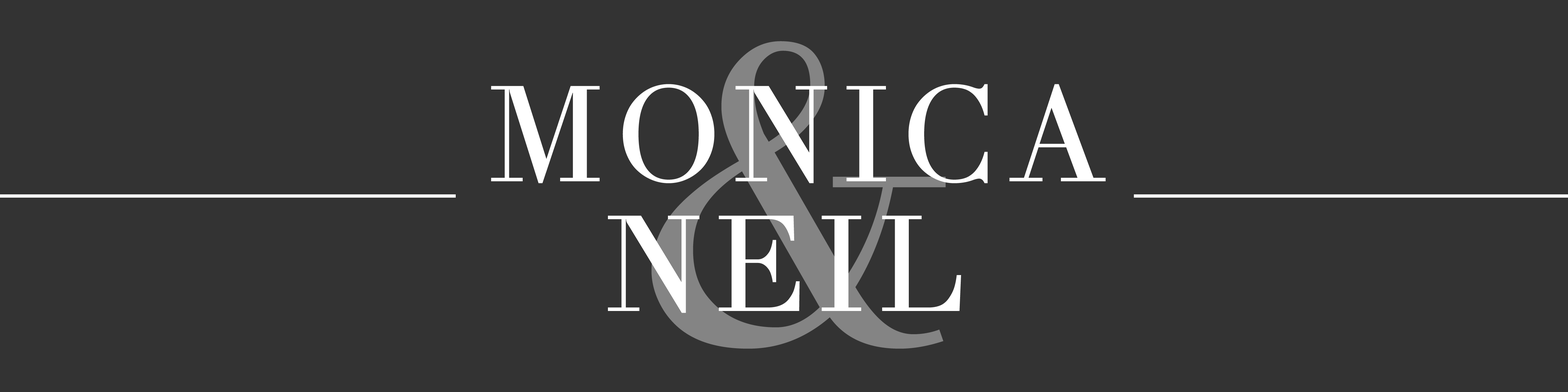
<style>
.page{position:relative;width:1568px;height:392px;background:#333333}
.page>*{position:absolute;margin:0}
.t1{font:408.3px "TheanoDidot-Regular";letter-spacing:0.06em;color:#848484}
.t2{font:136.1px "TheanoDidot-Regular";letter-spacing:0.06em;color:#ffffff}
</style>
<div class="page">
<p class="t1" style="left:651px;top:41px;width:295px;height:308px">&amp;</p>
<p class="t2" style="left:491px;top:84px;width:615px;height:99px">MONICA</p>
<p class="t2" style="left:608px;top:216px;width:353px;height:97px">NEIL</p>
</div>
